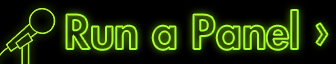
<style>
.page{position:relative;width:336px;height:64px;background:#000000}
.page>*{position:absolute;margin:0}
.t1{font:45.9px "FuturaStd-Heavy"}
</style>
<div class="page">
<p class="t1" style="left:66px;top:10px;width:262px;height:40px">Run a Panel ›</p>
</div>
